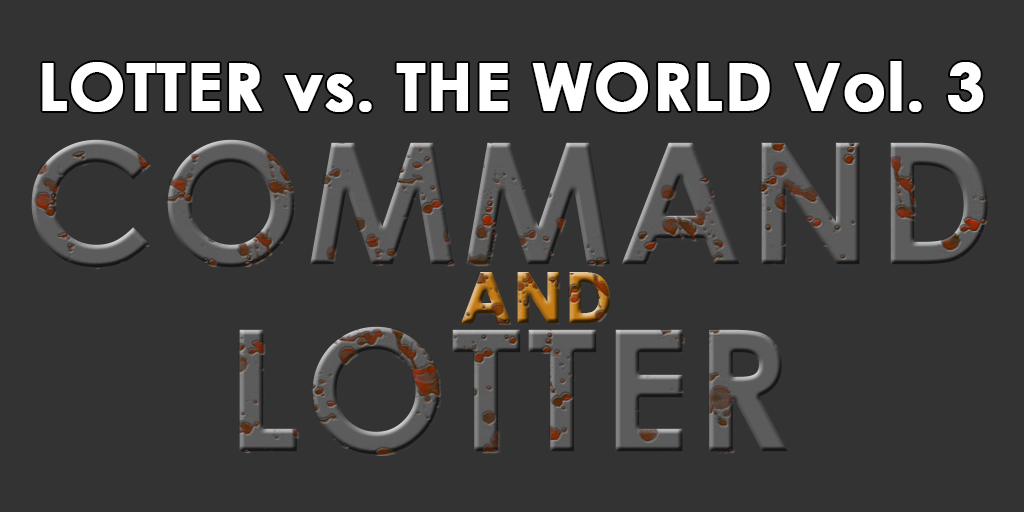
<style>
.page{position:relative;width:1024px;height:512px;background:#333333}
.page>*{position:absolute;margin:0}
.t1{font:66.5px "CenturyGothic-Bold";color:#ffffff;font-weight:bold}
.t2{font:168px/187.1px "CenturyGothic-Bold";font-weight:bold}
.t3{font:69px "CenturyGothic-Bold";font-weight:bold}
</style>
<div class="page">
<p class="t1" style="left:42px;top:61px;width:942px;height:51px">LOTTER vs. THE WORLD Vol. 3</p>
<p class="t2" style="left:31px;top:139px;width:957px;height:316px;text-align:center">COMMAND<br>LOTTER</p>
<p class="t3" style="left:461px;top:272px;width:150px;height:51px">AND</p>
</div>
